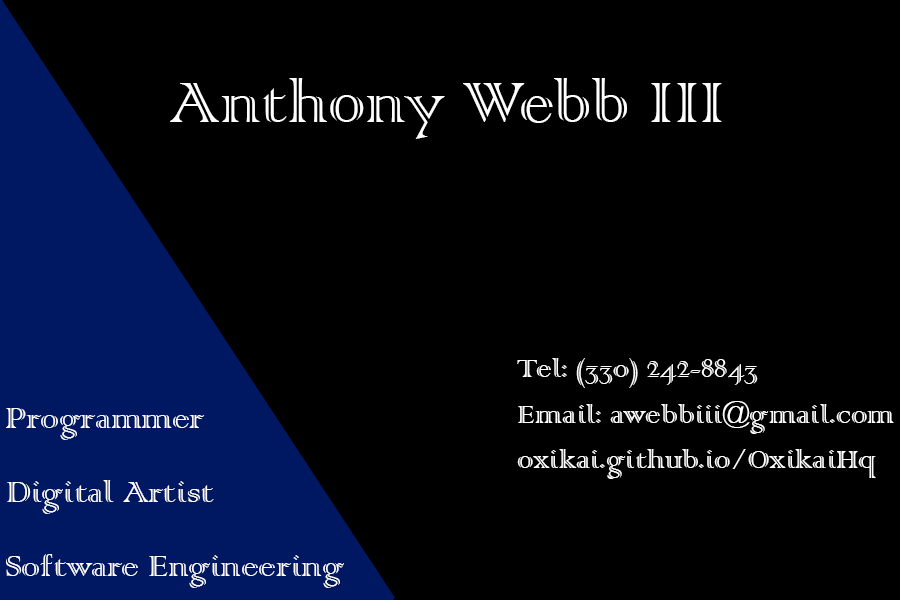
<style>
.page{position:relative;width:900px;height:600px;background:#000000}
.page>*{position:absolute;margin:0}
.t1{font:74.9px "ColonnaMT";color:#ffffff}
.t2{font:33.3px "ColonnaMT";color:#ffffff}
.t3{font:37.5px "ColonnaMT";color:#ffffff}
</style>
<div class="page">
<p class="t1" style="left:170px;top:78px;width:552px;height:61px">Anthony Webb III</p>
<p class="t2" style="left:517px;top:358px;width:241px;height:30px">Tel: (330) 242-8843</p>
<p class="t2" style="left:518px;top:401px;width:376px;height:33px">Email: awebbiii@gmail.com</p>
<p class="t3" style="left:6px;top:408px;width:199px;height:32px">Programmer</p>
<p class="t2" style="left:517px;top:449px;width:359px;height:30px">oxikai.github.io/OxikaiHq</p>
<p class="t3" style="left:7px;top:480px;width:207px;height:34px">Digital Artist</p>
<p class="t3" style="left:6px;top:554px;width:338px;height:34px">Software Engineering</p>
</div>
